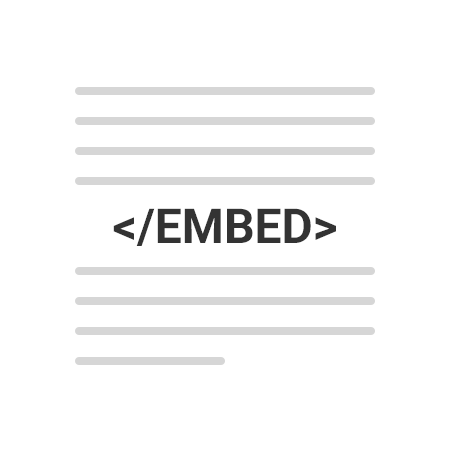
<style>
.page{position:relative;width:450px;height:450px;background:#ffffff}
.page>*{position:absolute;margin:0}
.t1{font:48px "Roboto-Bold";color:#333333}
</style>
<div class="page">
<p class="t1" style="left:113px;top:208px;width:223px;height:38px">&lt;/EMBED&gt;</p>
</div>
